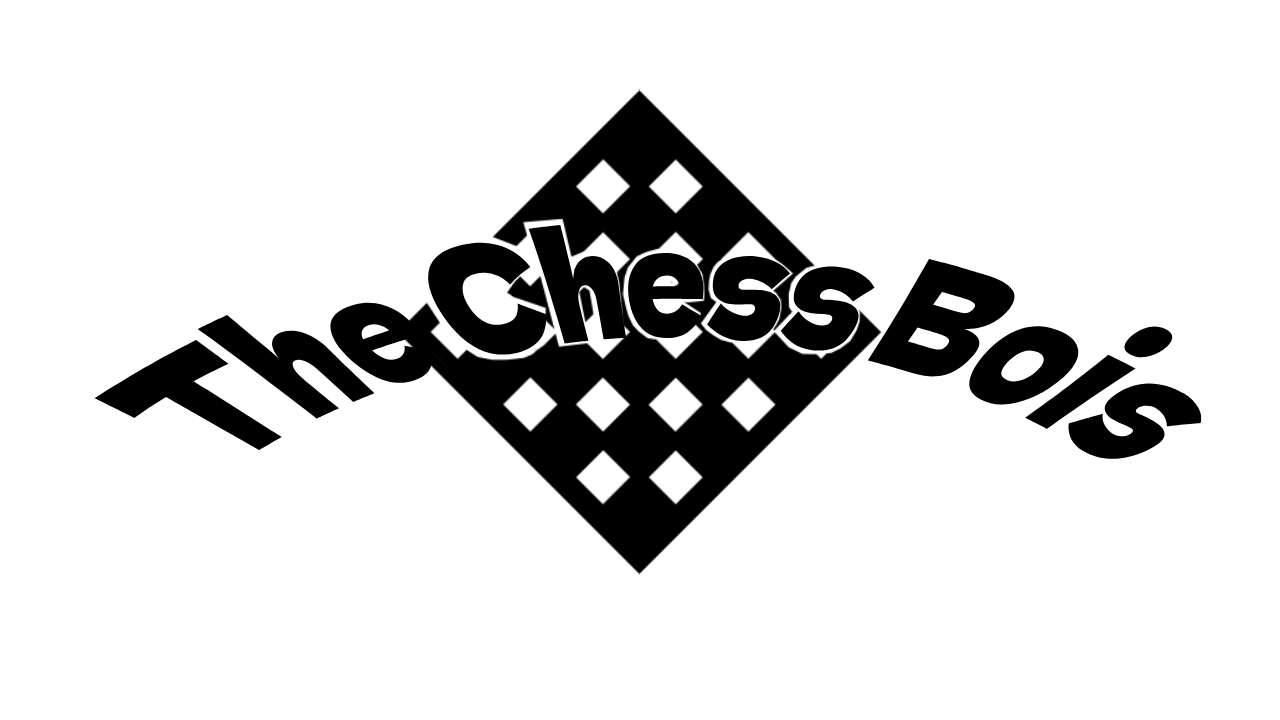
<style>
.page{position:relative;width:1280px;height:720px;background:#ffffff}
.page>*{position:absolute;margin:0}
.t1{font:111.8px "DelaGothicOne-Regular";color:#000000}
</style>
<div class="page">
<p class="t1" style="left:94px;top:224px;width:1108px;height:235px">The Chess Bois</p>
</div>
